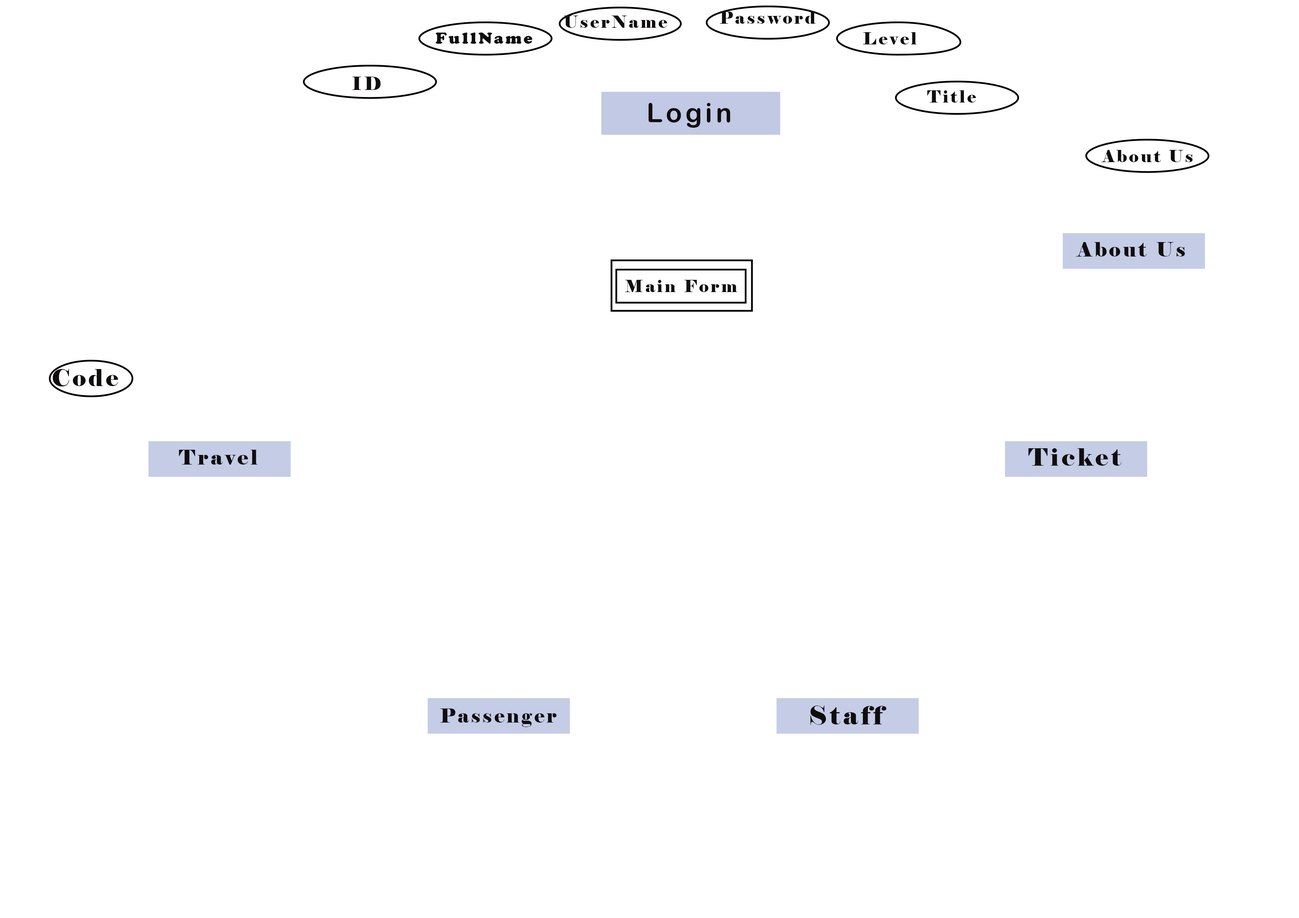
<style>
.page{position:relative;width:1299px;height:918px;background:#ffffff}
.page>*{position:absolute;margin:0}
.t1{font:16.8px "Elephant-Regular";letter-spacing:0.12em;color:#100d0d}
.t2{font:16.8px "CooperBlack";letter-spacing:0.12em;color:#100d0d}
.t3{font:18.7px "Elephant-Regular";letter-spacing:0.12em;color:#100d0d}
.t4{font:26.7px "ArialRoundedMTBold";letter-spacing:0.12em;color:#100d0d}
.t5{font:20px "Elephant-Regular";letter-spacing:0.12em;color:#100d0d}
.t6{font:23.2px "Elephant-Regular";letter-spacing:0.12em;color:#100d0d}
.t7{font:20.4px "Elephant-Regular";letter-spacing:0.12em;color:#100d0d}
.t8{font:24.1px "Elephant-Regular";letter-spacing:0.12em;color:#100d0d}
.t9{font:19.2px "Elephant-Regular";letter-spacing:0.12em;color:#100d0d}
.t10{font:25.5px "Elephant-Regular";letter-spacing:0.12em;color:#100d0d}
</style>
<div class="page">
<p class="t1" style="left:564px;top:16px;width:103px;height:12px">UserName</p>
<p class="t1" style="left:720px;top:11px;width:96px;height:13px">Password</p>
<p class="t2" style="left:435px;top:33px;width:97px;height:11px">FullName</p>
<p class="t1" style="left:863px;top:32px;width:53px;height:12px">Level</p>
<p class="t3" style="left:352px;top:77px;width:29px;height:13px">ID</p>
<p class="t1" style="left:927px;top:90px;width:49px;height:13px">Title</p>
<p class="t4" style="left:648px;top:103px;width:82px;height:25px">Login</p>
<p class="t1" style="left:1101px;top:150px;width:91px;height:12px">About Us</p>
<p class="t5" style="left:1075px;top:242px;width:110px;height:15px">About Us</p>
<p class="t1" style="left:625px;top:280px;width:112px;height:12px">Main Form</p>
<p class="t6" style="left:53px;top:369px;width:65px;height:18px">Code</p>
<p class="t7" style="left:179px;top:450px;width:79px;height:15px">Travel</p>
<p class="t8" style="left:1028px;top:448px;width:93px;height:18px">Ticket</p>
<p class="t9" style="left:440px;top:709px;width:116px;height:18px">Passenger</p>
<p class="t10" style="left:810px;top:706px;width:76px;height:19px">Staff</p>
</div>
